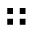
<style>
.page{position:relative;width:32px;height:32px;background:#ffffff}
.page>*{position:absolute;margin:0}
.t1{font:30px "Verdana-Bold";letter-spacing:0.02em;color:#000000}
</style>
<div class="page">
<p class="t1" style="left:7px;top:8px;width:19px;height:17px">::</p>
</div>
